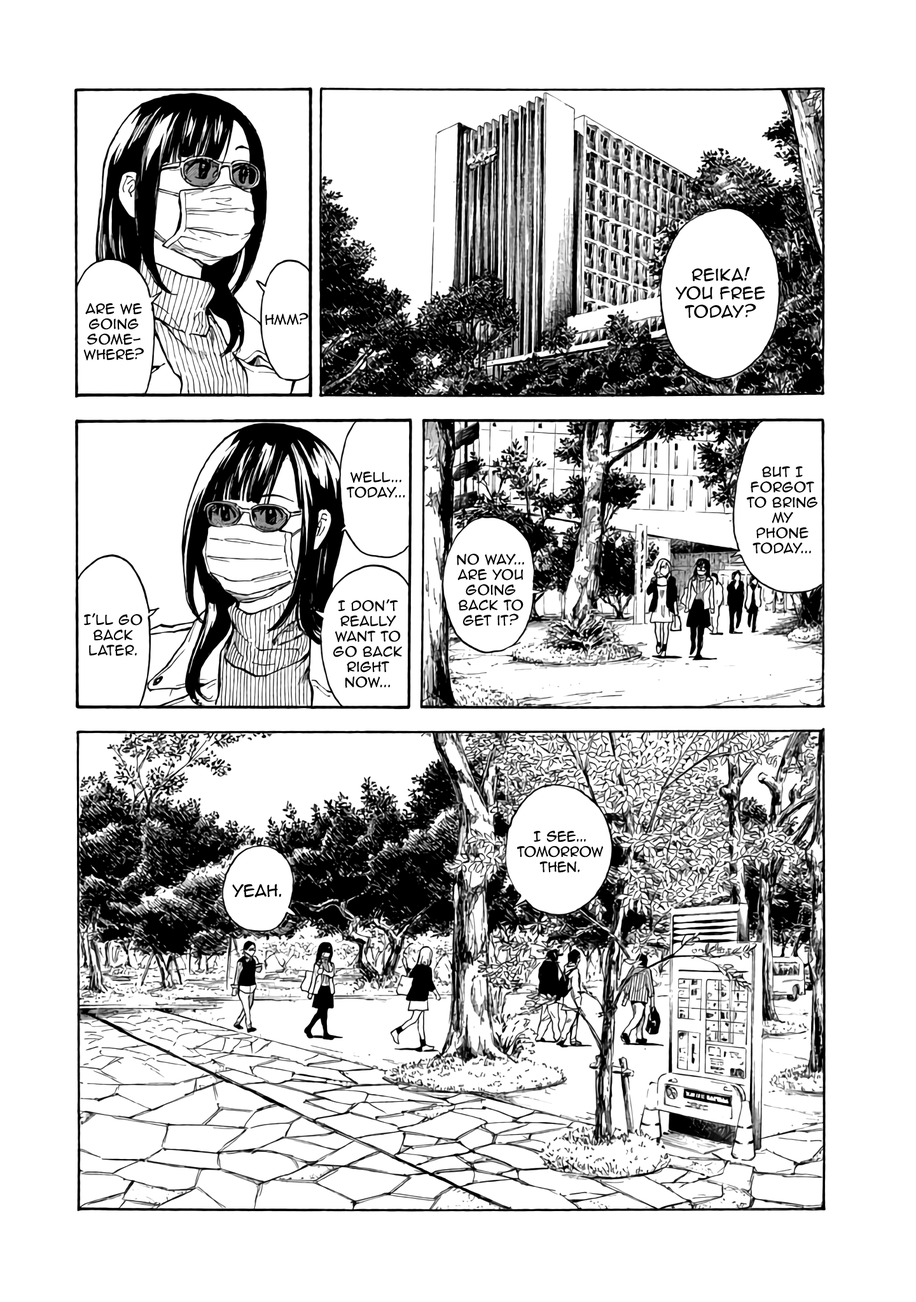
<style>
.page{position:relative;width:916px;height:1302px;background:#ffffff}
.page>*{position:absolute;margin:0}
.t1{font:15.3px "AnimeAce2.0BB";color:#000000}
.t2{font:12.7px "AnimeAce2.0BB";color:#000000}
</style>
<div class="page">
<p class="t1" style="left:675px;top:267px;width:90px;height:52px;text-align:center">Reika! You free today?</p>
<p class="t2" style="left:83px;top:303px;width:61px;height:58px;text-align:center">Are we going some-<br>where?</p>
<p class="t2" style="left:265px;top:313px;width:43px;height:13px">Hmm?</p>
<p class="t2" style="left:347px;top:471px;width:58px;height:27px;text-align:center">Well... Today...</p>
<p class="t2" style="left:747px;top:466px;width:70px;height:88px;text-align:center">but I forgot to bring my phone today...</p>
<p class="t2" style="left:457px;top:554px;width:67px;height:72px;text-align:center">No way... Are you going back to get it?</p>
<p class="t2" style="left:333px;top:599px;width:69px;height:89px;text-align:center">I don’t really want to go back right now...</p>
<p class="t2" style="left:84px;top:613px;width:58px;height:43px;text-align:center">I’ll go back later.</p>
<p class="t2" style="left:516px;top:830px;width:87px;height:43px;text-align:center">I see... Tomorrow then.</p>
<p class="t1" style="left:232px;top:884px;width:49px;height:14px">yeah.</p>
</div>
